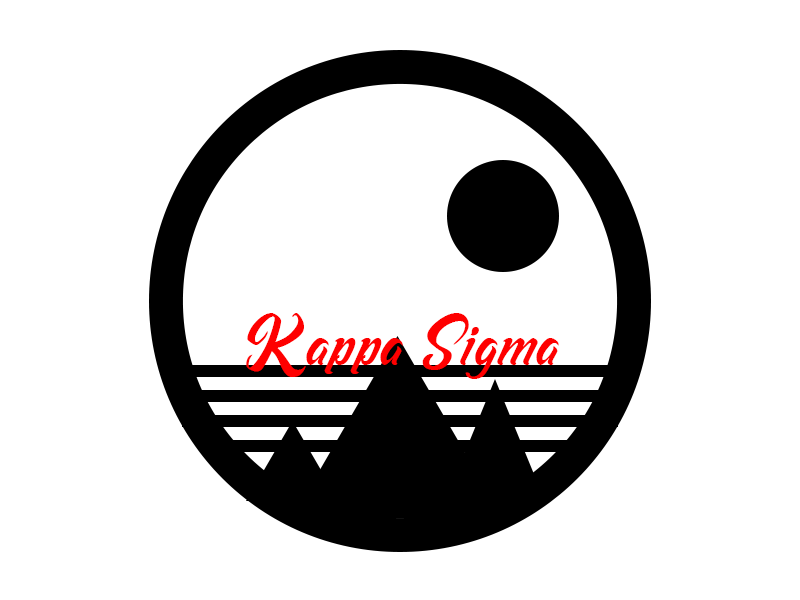
<style>
.page{position:relative;width:800px;height:600px;background:#ffffff}
.page>*{position:absolute;margin:0}
.t1{font:72px "Rashfeng";color:#fe0000}
</style>
<div class="page">
<p class="t1" style="left:246px;top:313px;width:313px;height:66px">Kappa Sigma</p>
</div>
